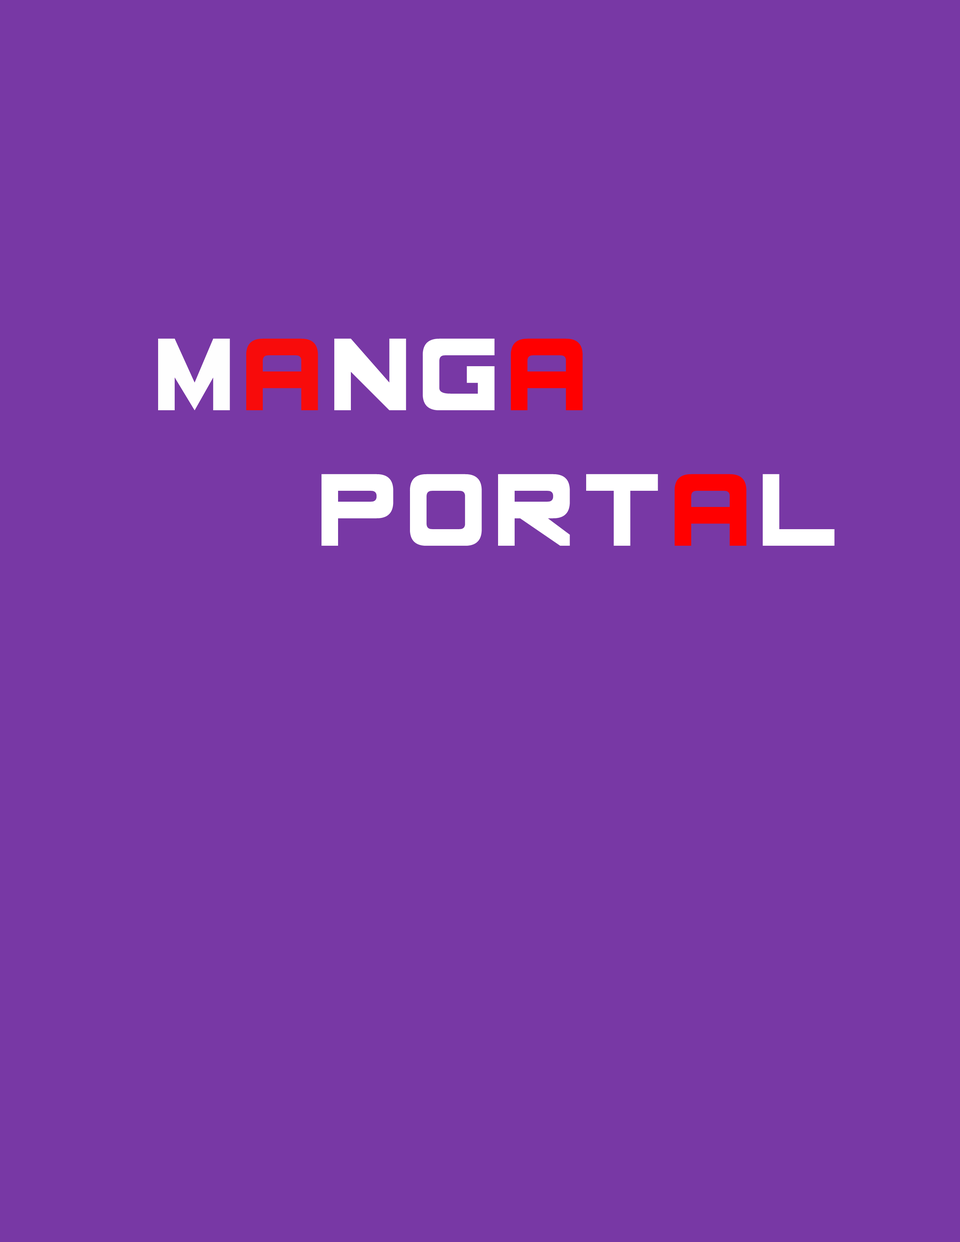
<style>
.page{position:relative;width:960px;height:1242px;background:#7838a5}
.page>*{position:absolute;margin:0}
.t1{font:112.9px "BasicSquare7Solid";color:#ffffff}
.t2{font:112.9px "BasicSquare7Solid";color:#fefefe}
.t3{font:112.9px "BasicSquare7Solid";color:#f80b0b}
.t4{font:112.9px "BasicSquare7Solid";color:#ff0000}
</style>
<div class="page">
<p class="t1" style="left:158px;top:338px;width:677px;height:208px"><span class="t2">M</span><span class="t3">a</span>ng<span class="t4">a<br>         </span>Port<span class="t4">a</span>l</p>
</div>
